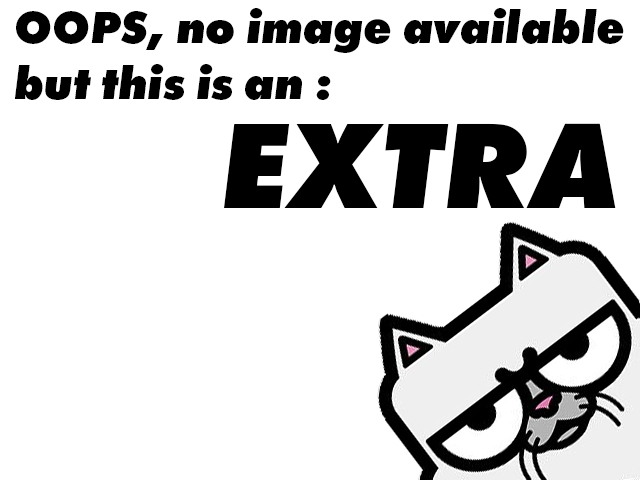
<style>
.page{position:relative;width:640px;height:480px;background:#ffffff}
.page>*{position:absolute;margin:0}
.t1{font:46.9px "FuturaPT-ExtraBoldObl";color:#000000}
.t2{font:125.4px "FuturaPT-ExtraBoldObl";color:#000000}
</style>
<div class="page">
<p class="t1" style="left:14px;top:8px;width:610px;height:92px">OOPS, no image available<br>but this is an :</p>
<p class="t2" style="left:224px;top:123px;width:392px;height:85px">EXTRA</p>
</div>
